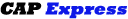
<style>
.page{position:relative;width:128px;height:19px;background:#ffffff}
.page>*{position:absolute;margin:0}
.t1{font:17.2px "Rockwell-ExtraBold";letter-spacing:0.01em;color:#0e19e7;font-style:italic}
.t2{font:17.2px "Rockwell-ExtraBold";letter-spacing:0.01em;color:#030303;font-style:italic}
</style>
<div class="page">
<p class="t1" style="left:0px;top:2px;width:127px;height:17px"><span class="t2">CAP </span>Express</p>
</div>
